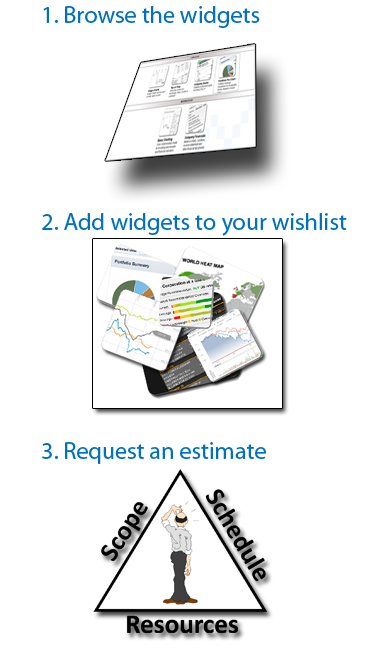
<style>
.page{position:relative;width:380px;height:664px;background:#ffffff}
.page>*{position:absolute;margin:0}
.t1{font:24px "MyriadPro-Regular";color:#0071bb}
</style>
<div class="page">
<p class="t1" style="left:43px;top:6px;width:217px;height:22px">1. Browse the widgets</p>
<p class="t1" style="left:42px;top:213px;width:305px;height:23px">2. Add widgets to your wishlist</p>
<p class="t1" style="left:42px;top:442px;width:224px;height:22px">3. Request an estimate</p>
</div>
